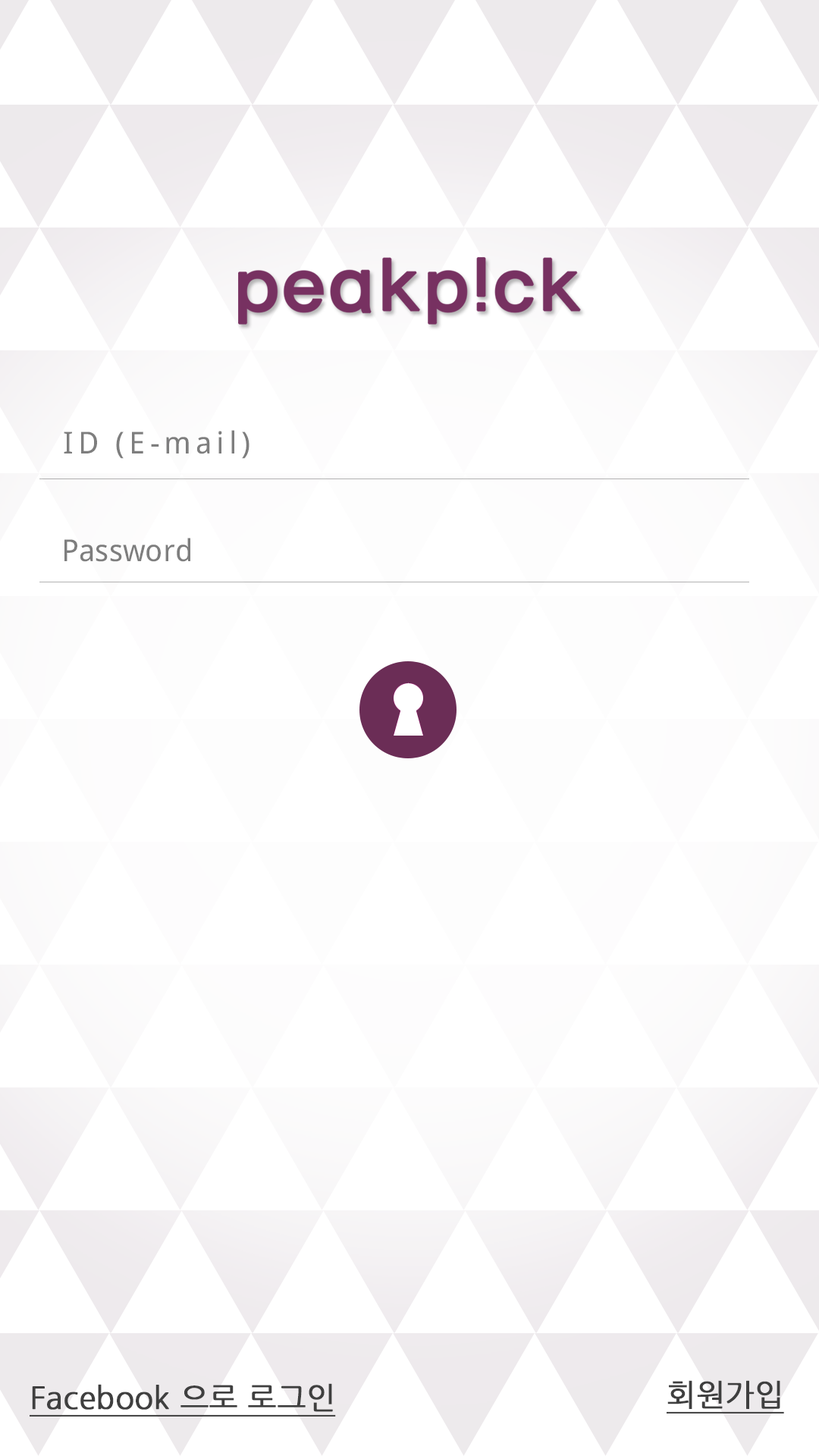
<style>
.page{position:relative;width:819px;height:1456px;background:#ffffff}
.page>*{position:absolute;margin:0}
.t1{font:30.3px "DroidSansFallback";letter-spacing:0.15em;color:#7e7e7e}
.t2{font:30.3px "DroidSansFallback";color:#7e7e7e}
.t3{font:30.3px "NanumGothicOTF";color:#3f3f3f;font-weight:bold;text-decoration:underline}
</style>
<div class="page">
<p class="t1" style="left:64px;top:430px;width:185px;height:29px">ID (E-mail)</p>
<p class="t2" style="left:64px;top:538px;width:126px;height:24px">Password</p>
<p class="t3" style="left:30px;top:1383px;width:306px;height:34px">Facebook 으로 로그인</p>
<p class="t3" style="left:667px;top:1380px;width:117px;height:34px">회원가입</p>
</div>
